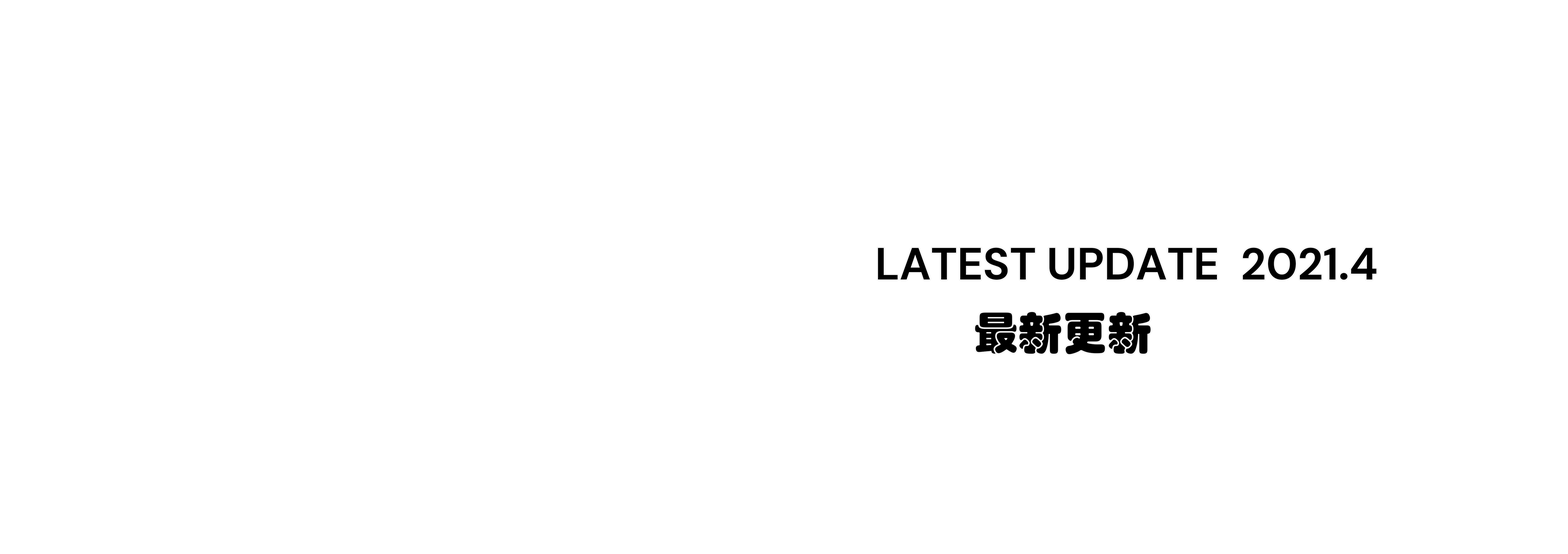
<style>
.page{position:relative;width:1568px;height:554px;background:#ffffff}
.page>*{position:absolute;margin:0}
.t1{font:44.7px "DMSans-Bold";color:#000000;text-transform:uppercase}
.t2{font:44.7px "STHupo";color:#000000;text-transform:uppercase}
</style>
<div class="page">
<p class="t1" style="left:878px;top:248px;width:498px;height:32px">latest update  2021.4</p>
<p class="t2" style="left:975px;top:312px;width:176px;height:42px">最新更新</p>
</div>
